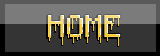
<style>
.page{position:relative;width:160px;height:56px;background:#343434}
.page>*{position:absolute;margin:0}
.t1{font:25px "Minecraft1.1"}
</style>
<div class="page">
<p class="t1" style="left:47px;top:16px;width:73px;height:22px">HOME</p>
<p class="t1" style="left:48px;top:15px;width:73px;height:22px">HOME</p>
</div>
